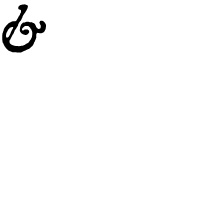
<style>
.page{position:relative;width:200px;height:200px;background:#ffffff}
.page>*{position:absolute;margin:0}
.t1{font:48px "IM_FELL_DW_Pica_Italic";letter-spacing:0.005em;color:#000000}
</style>
<div class="page">
<p class="t1" style="left:2px;top:4px;width:44px;height:49px">&amp;</p>
</div>
